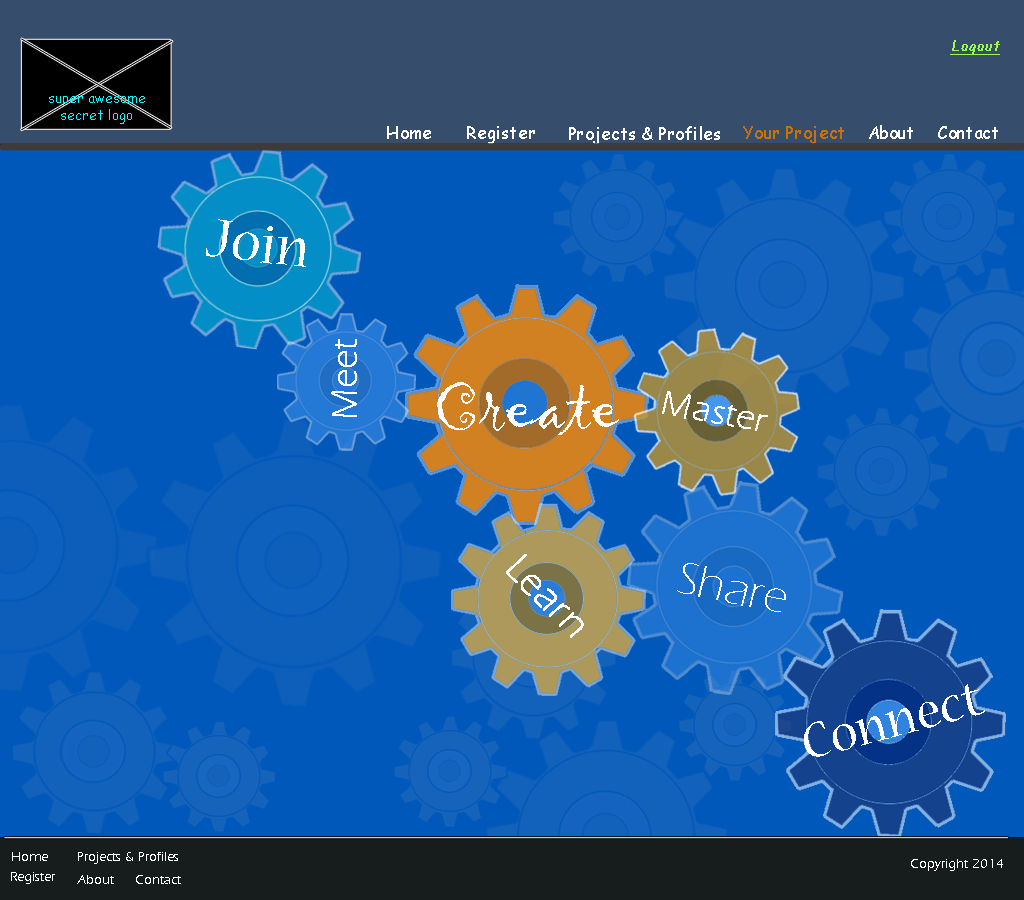
<style>
.page{position:relative;width:1024px;height:900px;background:#0058ba}
.page>*{position:absolute;margin:0}
.t1{font:14px "ComicSansMS";color:#9bf952;font-weight:bold;font-style:italic;text-decoration:underline}
.t2{font:14px "ComicSansMS";color:#11f8f8}
.t3{font:17.3px "ComicSansMS";color:#ffffff}
.t4{font:17.3px "ComicSansMS";color:#cb7004}
.t5{font:60px "NuevaStd-Regular";color:#ffffff}
.t6{font:36px "ErasITC-Light";color:#ffffff;font-weight:bold}
.t7{font:72px "Gigi-Regular";color:#ffffff}
.t8{font:40px "ErasITC-Light";color:#ffffff;font-weight:bold}
.t9{font:48px "ErasITC-Light";color:#ffffff}
.t10{font:55px "NuevaStd-Regular";color:#ffffff}
.t11{font:14px "ErasITC-Light";color:#ffffff}
</style>
<div class="page">
<p class="t1" style="left:950px;top:40px;width:50px;height:15px">Logout</p>
<p class="t2" style="left:49px;top:96px;width:96px;height:28px;text-align:center">super awesome<br>secret logo</p>
<p class="t3" style="left:387px;top:126px;width:44px;height:13px">Home</p>
<p class="t3" style="left:467px;top:126px;width:68px;height:18px">Register</p>
<p class="t3" style="left:569px;top:126px;width:151px;height:19px">Projects &amp; Profiles</p>
<p class="t4" style="left:743px;top:126px;width:101px;height:18px">Your Project</p>
<p class="t3" style="left:869px;top:125px;width:44px;height:14px">About</p>
<p class="t3" style="left:938px;top:126px;width:60px;height:13px">Contact</p>
<p class="t5" style="left:206px;top:219px;width:100px;height:48px;rotate:7deg">Join</p>
<p class="t6" style="left:331px;top:339px;width:26px;height:78px;rotate:-90deg">Meet</p>
<p class="t7" style="left:437px;top:382px;width:182px;height:53px">Create</p>
<p class="t6" style="left:662px;top:391px;width:106px;height:40px;rotate:10deg">Master</p>
<p class="t8" style="left:506px;top:554px;width:78px;height:84px;rotate:45deg">Learn</p>
<p class="t9" style="left:677px;top:563px;width:109px;height:49px;rotate:11deg">Share</p>
<p class="t10" style="left:804px;top:684px;width:181px;height:73px;rotate:-15deg">Connect</p>
<p class="t11" style="left:12px;top:852px;width:36px;height:9px">Home</p>
<p class="t11" style="left:78px;top:852px;width:100px;height:12px">Projects &amp; Profiles</p>
<p class="t11" style="left:911px;top:859px;width:92px;height:12px">Copyright 2014</p>
<p class="t11" style="left:11px;top:872px;width:44px;height:12px">Register</p>
<p class="t11" style="left:77px;top:875px;width:37px;height:9px">About</p>
<p class="t11" style="left:136px;top:875px;width:45px;height:9px">Contact</p>
</div>
